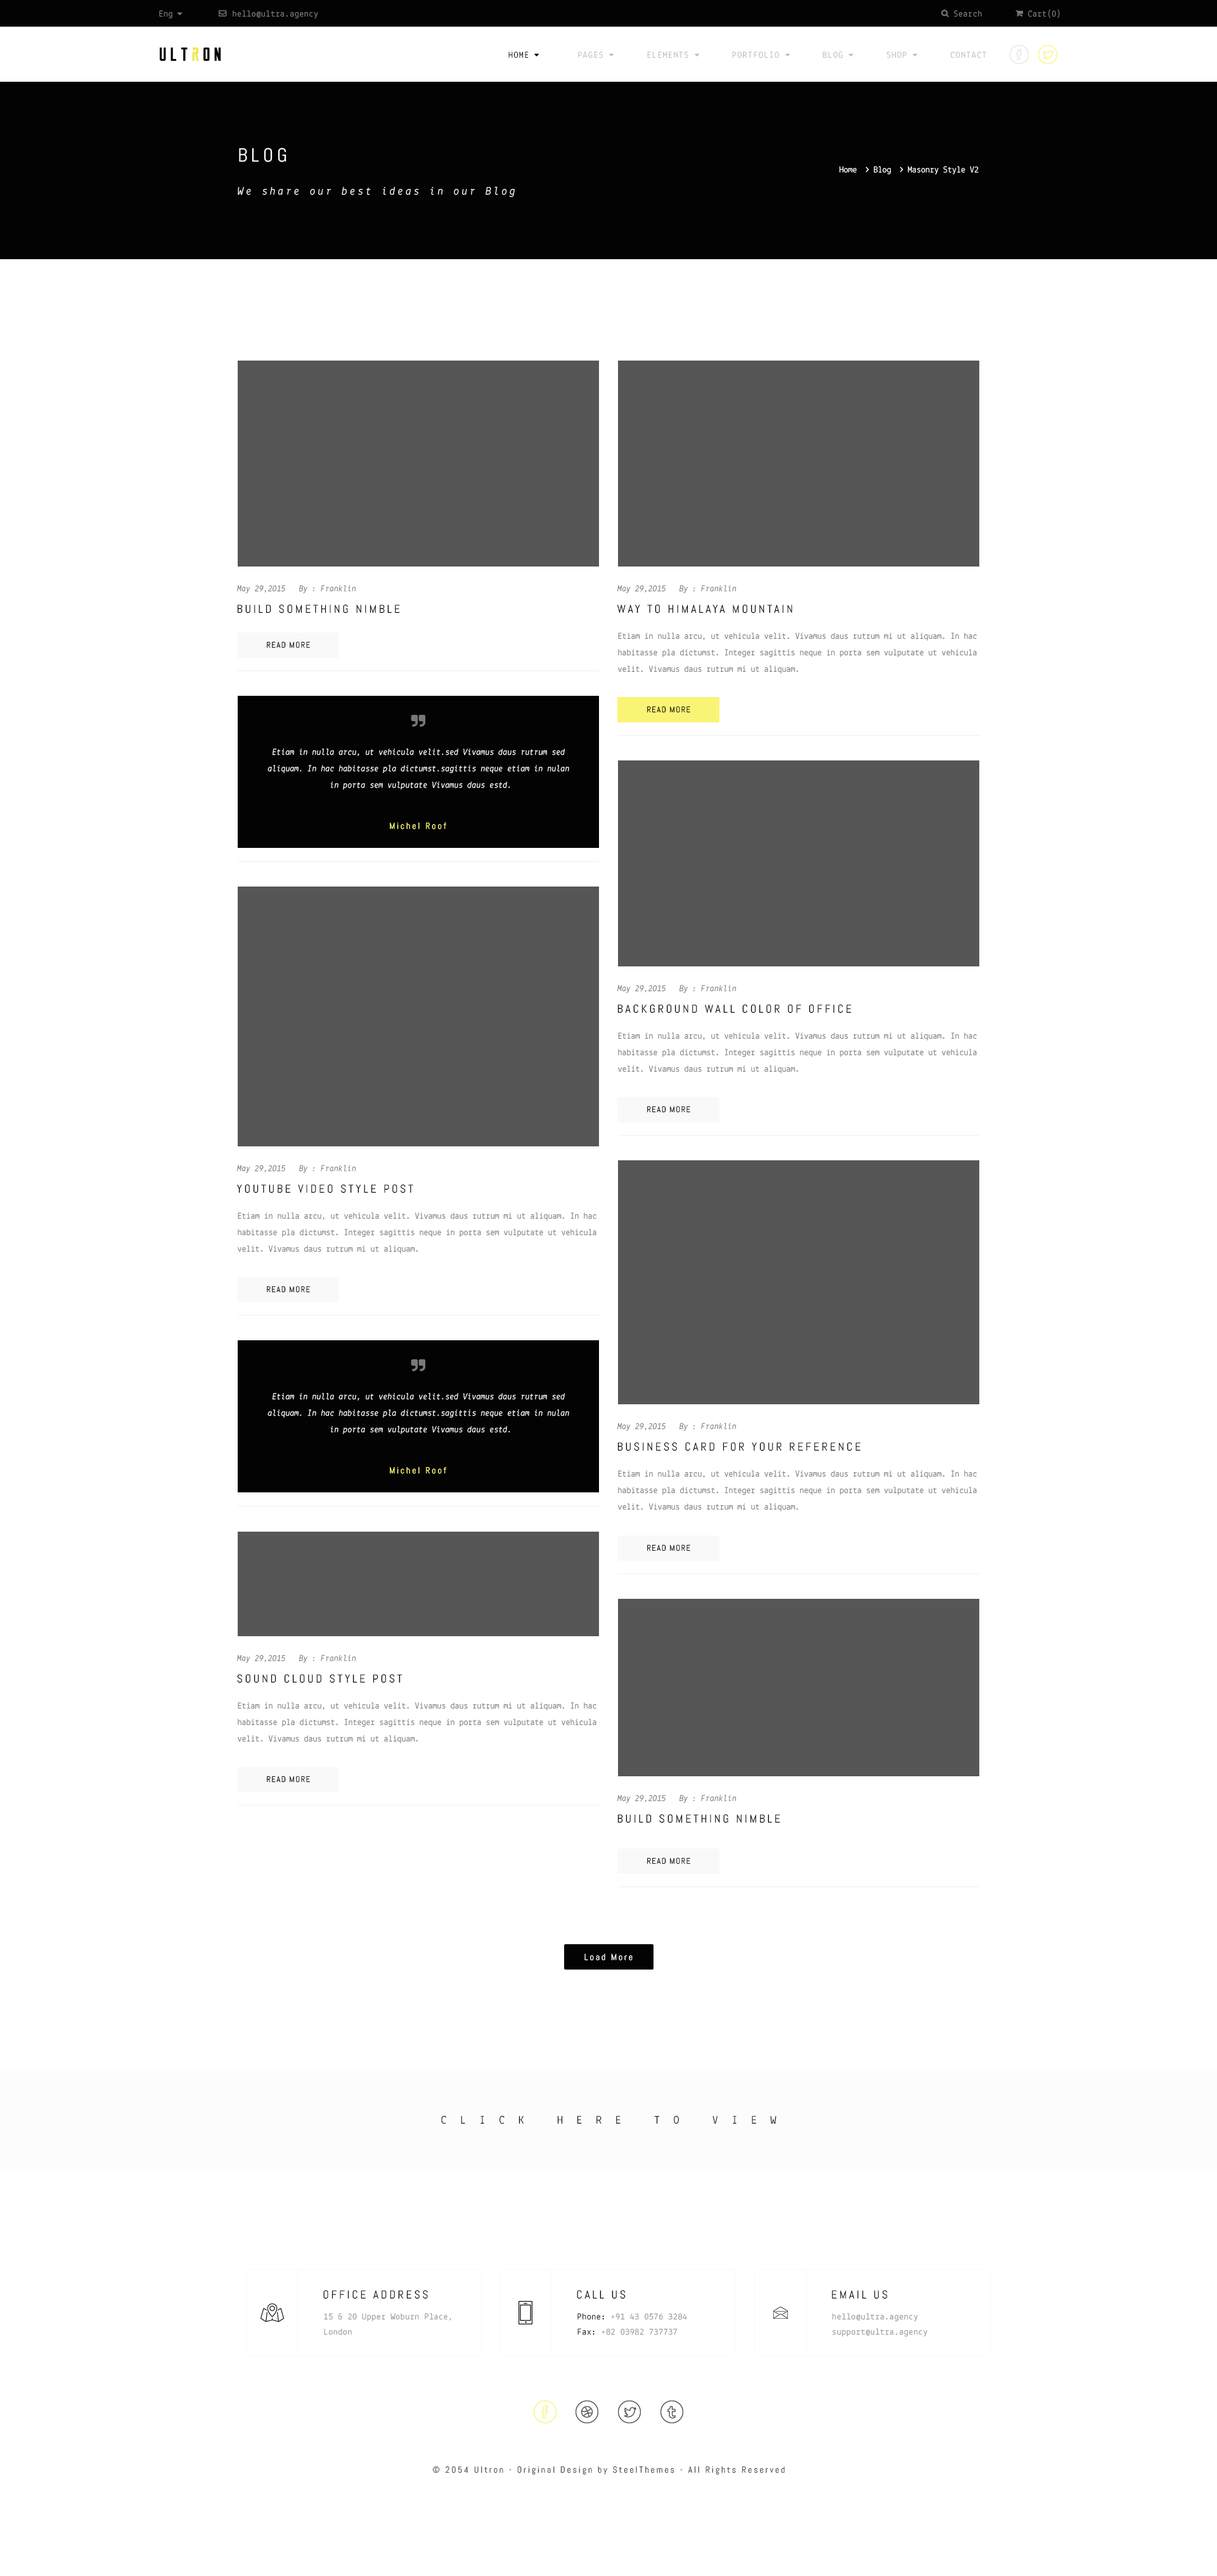
<style>
.page{position:relative;width:1217px;height:2576px;background:#ffffff}
.page>*{position:absolute;margin:0}
.t1{font:8.9px "Lekton-Regular";letter-spacing:0.04em;color:#787878}
.t2{font:8.9px "Lekton-Regular";letter-spacing:0.1em;color:#bfbfbf;text-transform:uppercase}
.t3{font:8.9px "Lekton-Regular";letter-spacing:0.1em;color:#030303;text-transform:uppercase}
.t4{font:19px "Abel-Regular";letter-spacing:0.2em;color:#ffffff;text-transform:uppercase}
.t5{font:11.4px "Lekton-Italic";letter-spacing:0.2em;color:#ffffff}
.t6{font:8.9px "Lekton-Italic";color:#787878}
.t7{font:11.4px "Abel-Regular";letter-spacing:0.2em;color:#030303;text-transform:uppercase}
.t8{font:8.2px "Abel-Regular";letter-spacing:0.1em;color:#030303;text-transform:uppercase}
.t9{font:8.9px/16.5px "Lekton-Regular";color:#787878}
.t10{font:8.9px/16.5px "Lekton-Italic";color:#ffffff}
.t11{font:8.9px "Abel-Regular";letter-spacing:0.2em;color:#faf476}
.t12{font:8.9px "Abel-Regular";letter-spacing:0.2em;color:#ffffff}
.t13{font:11.4px "Lekton-Regular";letter-spacing:1.2em;color:#030303;text-transform:uppercase}
.t14{font:8.9px/15.2px "Lekton-Regular";letter-spacing:0.04em;color:#969595}
.t15{font:8.9px/15.2px "Lekton-Regular";letter-spacing:0.04em;color:#030303}
.t16{font:8.9px "Abel-Regular";letter-spacing:0.2em;color:#4f4f4f}
</style>
<div class="page">
<p class="t1" style="left:159px;top:10px;width:13px;height:8px">Eng</p>
<p class="t1" style="left:233px;top:10px;width:85px;height:8px">hello@ultra.agency</p>
<p class="t1" style="left:954px;top:10px;width:28px;height:7px">Search</p>
<p class="t1" style="left:1028px;top:9px;width:32px;height:9px">Cart(0)</p>
<p class="t2" style="left:508px;top:51px;width:478px;height:7px"><span class="t3">Home         </span>Pages        Elements        Portfolio        Blog        Shop        Contact</p>
<p class="t4" style="left:239px;top:148px;width:47px;height:14px">blog</p>
<p class="t5" style="left:238px;top:186px;width:277px;height:11px">We share our best ideas in our Blog</p>
<p class="t6" style="left:236px;top:585px;width:120px;height:8px">May 29,2015   By : Franklin</p>
<p class="t6" style="left:617px;top:585px;width:119px;height:8px">May 29,2015   By : Franklin</p>
<p class="t7" style="left:237px;top:605px;width:163px;height:8px">Build something nimble</p>
<p class="t7" style="left:617px;top:605px;width:175px;height:8px">way to himalaya mountain</p>
<p class="t8" style="left:267px;top:641px;width:43px;height:7px">Read More</p>
<p class="t9" style="left:618px;top:632px;width:359px;height:42px">Etiam in nulla arcu, ut vehicula velit. Vivamus daus rutrum mi ut aliquam. In hac habitasse pla dictumst. Integer sagittis neque in porta sem vulputate ut vehicula velit. Vivamus daus rutrum mi ut aliquam.</p>
<p class="t8" style="left:647px;top:706px;width:43px;height:7px">Read More</p>
<p class="t10" style="left:267px;top:748px;width:302px;height:42px;text-align:center">Etiam in nulla arcu, ut vehicula velit.sed Vivamus daus rutrum sed aliquam. In hac habitasse pla dictumst.sagittis neque etiam in nulan<br> in porta sem vulputate Vivamus daus estd.</p>
<p class="t11" style="left:390px;top:823px;width:56px;height:7px">Michel Roof</p>
<p class="t6" style="left:617px;top:985px;width:119px;height:8px">May 29,2015   By : Franklin</p>
<p class="t7" style="left:617px;top:1004px;width:234px;height:9px">background wall color of office</p>
<p class="t9" style="left:618px;top:1032px;width:359px;height:41px">Etiam in nulla arcu, ut vehicula velit. Vivamus daus rutrum mi ut aliquam. In hac habitasse pla dictumst. Integer sagittis neque in porta sem vulputate ut vehicula velit. Vivamus daus rutrum mi ut aliquam.</p>
<p class="t8" style="left:647px;top:1106px;width:43px;height:7px">Read More</p>
<p class="t6" style="left:236px;top:1165px;width:120px;height:8px">May 29,2015   By : Franklin</p>
<p class="t7" style="left:236px;top:1184px;width:177px;height:9px">youtube video style post</p>
<p class="t9" style="left:238px;top:1212px;width:358px;height:41px">Etiam in nulla arcu, ut vehicula velit. Vivamus daus rutrum mi ut aliquam. In hac habitasse pla dictumst. Integer sagittis neque in porta sem vulputate ut vehicula velit. Vivamus daus rutrum mi ut aliquam.</p>
<p class="t8" style="left:267px;top:1286px;width:43px;height:7px">Read More</p>
<p class="t10" style="left:267px;top:1393px;width:302px;height:41px;text-align:center">Etiam in nulla arcu, ut vehicula velit.sed Vivamus daus rutrum sed aliquam. In hac habitasse pla dictumst.sagittis neque etiam in nulan<br> in porta sem vulputate Vivamus daus estd.</p>
<p class="t6" style="left:617px;top:1423px;width:119px;height:8px">May 29,2015   By : Franklin</p>
<p class="t7" style="left:617px;top:1442px;width:244px;height:9px">business card for your reference</p>
<p class="t11" style="left:390px;top:1467px;width:56px;height:7px">Michel Roof</p>
<p class="t9" style="left:618px;top:1470px;width:359px;height:41px">Etiam in nulla arcu, ut vehicula velit. Vivamus daus rutrum mi ut aliquam. In hac habitasse pla dictumst. Integer sagittis neque in porta sem vulputate ut vehicula velit. Vivamus daus rutrum mi ut aliquam.</p>
<p class="t8" style="left:647px;top:1544px;width:43px;height:7px">Read More</p>
<p class="t6" style="left:236px;top:1655px;width:120px;height:8px">May 29,2015   By : Franklin</p>
<p class="t7" style="left:237px;top:1674px;width:165px;height:9px">sound cloud style post</p>
<p class="t9" style="left:238px;top:1702px;width:358px;height:41px">Etiam in nulla arcu, ut vehicula velit. Vivamus daus rutrum mi ut aliquam. In hac habitasse pla dictumst. Integer sagittis neque in porta sem vulputate ut vehicula velit. Vivamus daus rutrum mi ut aliquam.</p>
<p class="t8" style="left:267px;top:1776px;width:43px;height:7px">Read More</p>
<p class="t6" style="left:617px;top:1795px;width:119px;height:8px">May 29,2015   By : Franklin</p>
<p class="t7" style="left:617px;top:1814px;width:163px;height:9px">Build something nimble</p>
<p class="t8" style="left:647px;top:1857px;width:43px;height:7px">Read More</p>
<p class="t12" style="left:584px;top:1954px;width:48px;height:7px">Load More</p>
<p class="t13" style="left:441px;top:2115px;width:335px;height:9px">Click here to view</p>
<p class="t7" style="left:323px;top:2290px;width:105px;height:9px">Office Address</p>
<p class="t7" style="left:577px;top:2290px;width:48px;height:9px">Call us</p>
<p class="t7" style="left:831px;top:2290px;width:56px;height:9px">Email us</p>
<p class="t14" style="left:324px;top:2313px;width:127px;height:22px">15 &amp; 20 Upper Woburn Place,<br>London</p>
<p class="t14" style="left:577px;top:2313px;width:110px;height:22px"><span class="t15">Phone:</span> +91 43 0576 3284<br><span class="t15">Fax:</span> +82 03982 737737</p>
<p class="t14" style="left:832px;top:2313px;width:95px;height:23px">hello@ultra.agency<br>support@ultra.agency</p>
<p class="t16" style="left:432px;top:2466px;width:353px;height:9px">© 2054 Ultron - Original Design by SteelThemes - All Rights Reserved</p>
</div>
